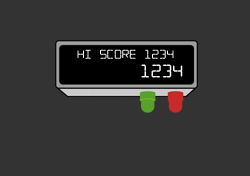
<style>
.page{position:relative;width:250px;height:176px;background:#333333}
.page>*{position:absolute;margin:0}
.t1{font:16px "DigitaldreamFat";color:#fdfafa}
.t2{font:23px "DigitaldreamFat";color:#fdfafa}
</style>
<div class="page">
<p class="t1" style="left:77px;top:49px;width:97px;height:10px">HI SCORE 1234</p>
<p class="t2" style="left:141px;top:64px;width:42px;height:14px">1234</p>
</div>
